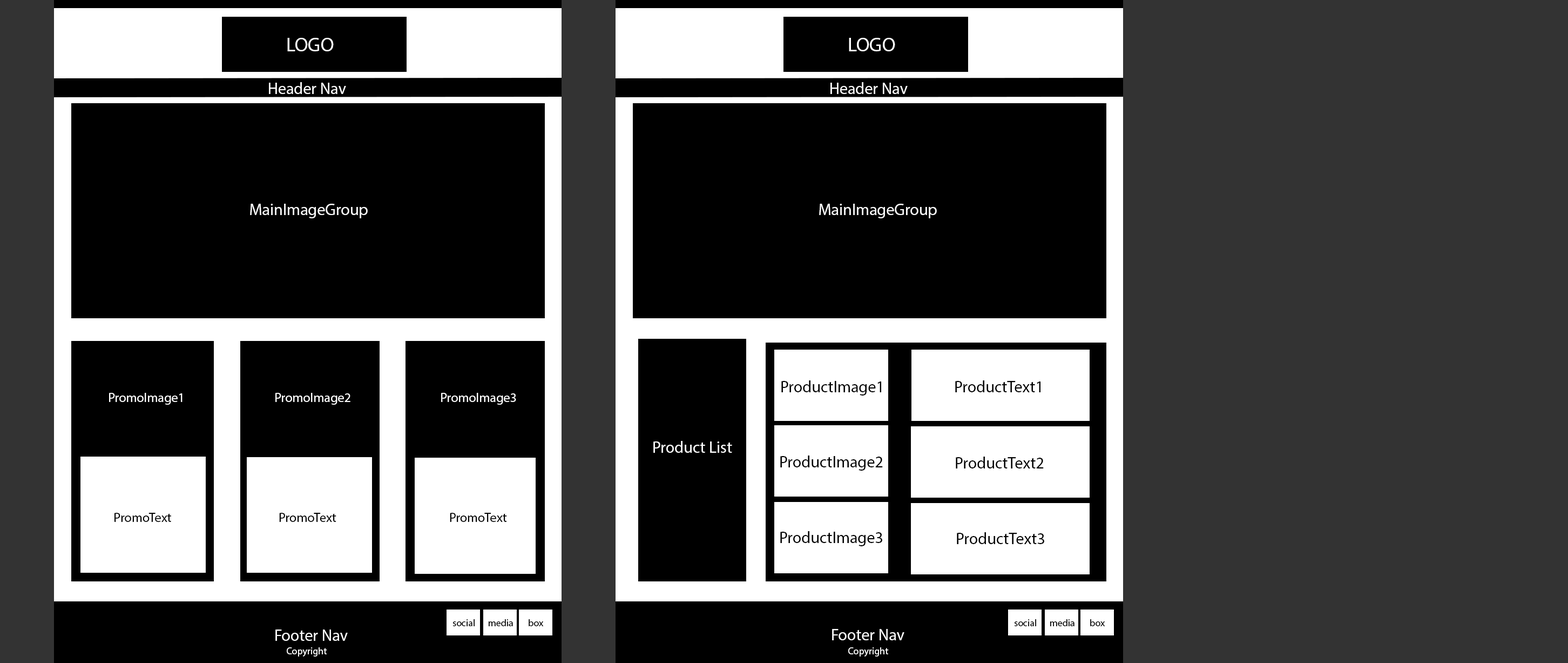
<style>
.page{position:relative;width:1568px;height:663px;background:#000000}
.page>*{position:absolute;margin:0}
.t1{font:19.4px "MyriadPro-Regular";color:#ffffff}
.t2{font:16.2px "MyriadPro-Regular";color:#ffffff}
.t3{font:16.2px "MyriadPro-Regular";color:#000000}
.t4{font:13px "MyriadPro-Regular";color:#ffffff}
.t5{font:13px "MyriadPro-Regular";color:#000000}
.t6{font:9.7px "MyriadPro-Regular";color:#000000}
.t7{font:9.7px "MyriadPro-Regular";color:#ffffff}
</style>
<div class="page">
<p class="t1" style="left:287px;top:38px;width:47px;height:13px">LOGO</p>
<p class="t1" style="left:849px;top:38px;width:46px;height:13px">LOGO</p>
<p class="t2" style="left:269px;top:82px;width:77px;height:12px">Header Nav</p>
<p class="t2" style="left:830px;top:82px;width:78px;height:12px">Header Nav</p>
<p class="t2" style="left:250px;top:204px;width:118px;height:14px">MainImageGroup</p>
<p class="t2" style="left:819px;top:204px;width:118px;height:14px">MainImageGroup</p>
<p class="t3" style="left:781px;top:380px;width:100px;height:15px">ProductImage1</p>
<p class="t3" style="left:955px;top:380px;width:85px;height:12px">ProductText1</p>
<p class="t4" style="left:109px;top:393px;width:74px;height:11px">PromoImage1</p>
<p class="t4" style="left:275px;top:393px;width:75px;height:11px">PromoImage2</p>
<p class="t4" style="left:441px;top:393px;width:75px;height:11px">PromoImage3</p>
<p class="t2" style="left:653px;top:441px;width:79px;height:11px">Product List</p>
<p class="t3" style="left:780px;top:455px;width:103px;height:15px">ProductImage2</p>
<p class="t3" style="left:956px;top:456px;width:88px;height:12px">ProductText2</p>
<p class="t5" style="left:114px;top:512px;width:57px;height:10px">PromoText3</p>
<p class="t5" style="left:279px;top:512px;width:57px;height:10px">PromoText3</p>
<p class="t5" style="left:450px;top:512px;width:57px;height:10px">PromoText3</p>
<p class="t3" style="left:780px;top:531px;width:102px;height:15px">ProductImage3</p>
<p class="t3" style="left:957px;top:532px;width:87px;height:12px">ProductText3</p>
<p class="t2" style="left:275px;top:629px;width:73px;height:11px">Footer Nav</p>
<p class="t6" style="left:452px;top:619px;width:23px;height:7px">social</p>
<p class="t6" style="left:489px;top:619px;width:24px;height:7px">media</p>
<p class="t6" style="left:529px;top:619px;width:15px;height:7px">box</p>
<p class="t2" style="left:832px;top:628px;width:72px;height:12px">Footer Nav</p>
<p class="t6" style="left:1014px;top:619px;width:22px;height:7px">social</p>
<p class="t6" style="left:1050px;top:619px;width:24px;height:7px">media</p>
<p class="t6" style="left:1090px;top:619px;width:15px;height:7px">box</p>
<p class="t7" style="left:287px;top:647px;width:40px;height:9px">Copyright</p>
<p class="t7" style="left:848px;top:647px;width:41px;height:9px">Copyright</p>
</div>
